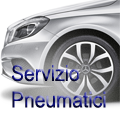
<style>
.page{position:relative;width:120px;height:120px}
.page>*{position:absolute;margin:0}
.t1{font:22px "ArialMT";scale:0.88 1}
</style>
<div class="page">
<p class="t1" style="left:12px;top:64px;width:94px;height:44px">Servizio<br>Pneumatici</p>
</div>
